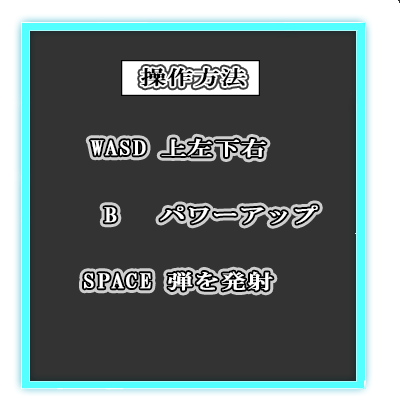
<style>
.page{position:relative;width:400px;height:400px;background:#333333}
.page>*{position:absolute;margin:0}
.t1{font:19.8px "HGMinchoB";letter-spacing:0.03em;color:#010101;font-weight:bold;scale:1.27 1}
.t2{font:19.8px "HGMinchoB";letter-spacing:0.03em;color:#ffffff;font-weight:bold;scale:1.27 1}
</style>
<div class="page">
<p class="t1" style="left:141px;top:68px;width:105px;height:19px">操作方法</p>
<p class="t2" style="left:90px;top:138px;width:176px;height:20px">WASD 上左下右</p>
<p class="t2" style="left:104px;top:205px;width:214px;height:19px">B 　パワーアップ</p>
<p class="t2" style="left:84px;top:271px;width:189px;height:20px">SPACE 弾を発射</p>
</div>
